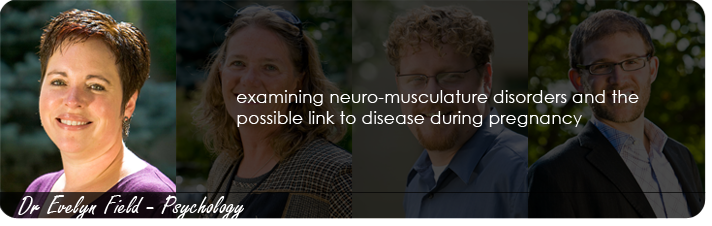
<style>
.page{position:relative;width:712px;height:226px}
.page>*{position:absolute;margin:0}
.t1{font:17.5px "CenturyGothic";color:#ffffff}
.t2{font:28.5px "FreestyleScript-Regular";color:#ffffff}
</style>
<div class="page">
<p class="t1" style="left:237px;top:90px;width:402px;height:37px">examining neuro-musculature disorders and the<br>possible link to disease during pregnancy</p>
<p class="t2" style="left:18px;top:195px;width:226px;height:26px">Dr Evelyn Field - Psychology</p>
</div>
